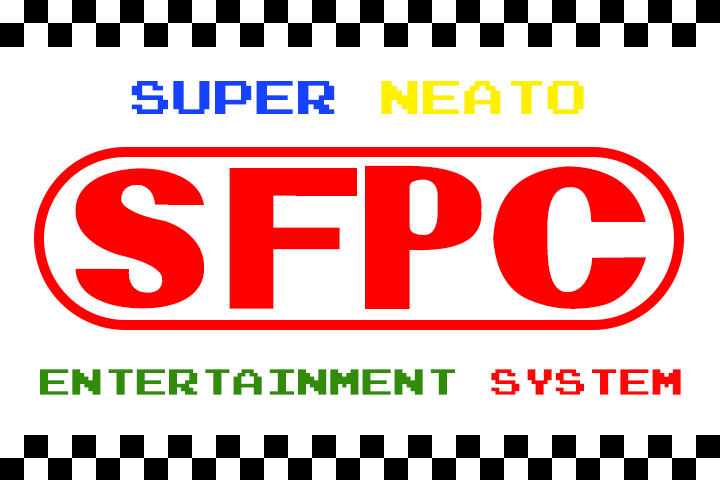
<style>
.page{position:relative;width:720px;height:480px;background:#ffffff}
.page>*{position:absolute;margin:0}
.t1{font:37.8px "PressStart2P-Regular";color:#1642ff;scale:1.1 1}
.t2{font:37.8px "PressStart2P-Regular";color:#fff000;scale:1.1 1}
.t3{font:180px "Pretendo";color:#ff0000;scale:1.1 1}
.t4{font:29.3px "PressStart2P-Regular";color:#318d09;scale:1.1 1}
.t5{font:29.3px "PressStart2P-Regular";color:#ff0505;scale:1.1 1}
</style>
<div class="page">
<p class="t1" style="left:131px;top:81px;width:453px;height:33px">SUPER <span class="t2">NEATO</span></p>
<p class="t3" style="left:75px;top:165px;width:571px;height:144px">SFPC</p>
<p class="t4" style="left:40px;top:369px;width:641px;height:26px">ENTERTAINMENT <span class="t5">SYSTEM</span></p>
</div>
